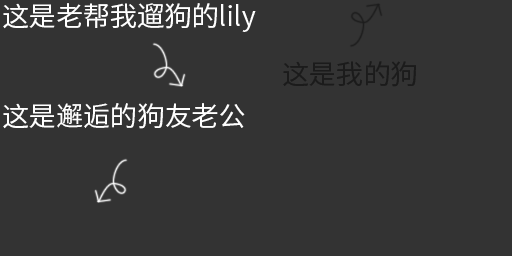
<style>
.page{position:relative;width:512px;height:256px;background:#333333}
.page>*{position:absolute;margin:0}
.t1{font:27.1px "SourceHanSansCN-Regular";color:#ffffff}
.t2{font:27.1px "SourceHanSansCN-Regular";color:#1b1b1b}
</style>
<div class="page">
<p class="t1" style="left:3px;top:3px;width:253px;height:29px">这是老帮我遛狗的lily</p>
<p class="t2" style="left:283px;top:61px;width:133px;height:26px">这是我的狗</p>
<p class="t1" style="left:3px;top:103px;width:242px;height:26px">这是邂逅的狗友老公</p>
</div>
